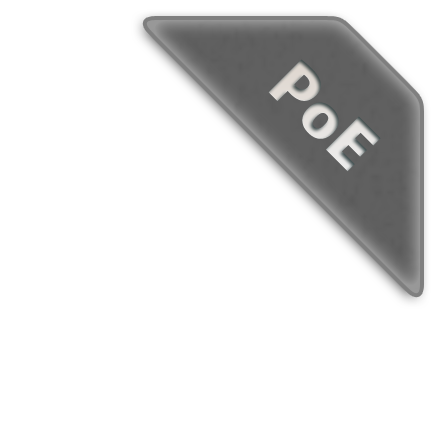
<style>
.page{position:relative;width:440px;height:440px;background:#ffffff}
.page>*{position:absolute;margin:0}
.t1{font:64px "mplus-1p-black"}
</style>
<div class="page">
<p class="t1" style="left:268px;top:59px;width:113px;height:113px;rotate:45deg">PoE</p>
</div>
